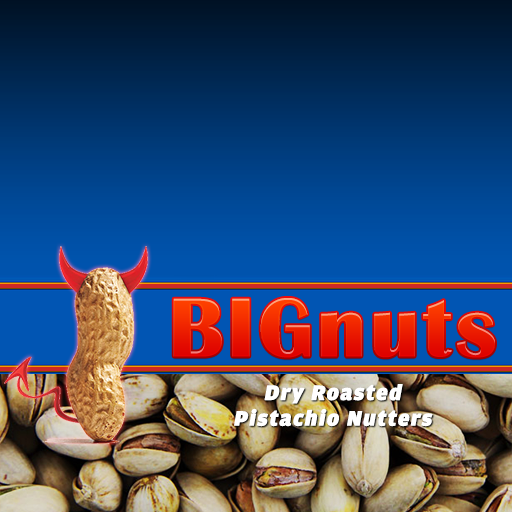
<style>
.page{position:relative;width:512px;height:512px}
.page>*{position:absolute;margin:0}
.t1{font:86.2px "BritannicBold";letter-spacing:0.05em}
.t2{font:21.4px "Amplitude-Black";letter-spacing:0.05em;color:#ffffff;font-weight:bold;font-style:italic;scale:1.03 1}
</style>
<div class="page">
<p class="t1" style="left:173px;top:298px;width:322px;height:60px">BIGnuts</p>
<p class="t2" style="left:234px;top:384px;width:199px;height:43px;text-align:center">Dry Roasted<br>Pistachio Nutters</p>
</div>
